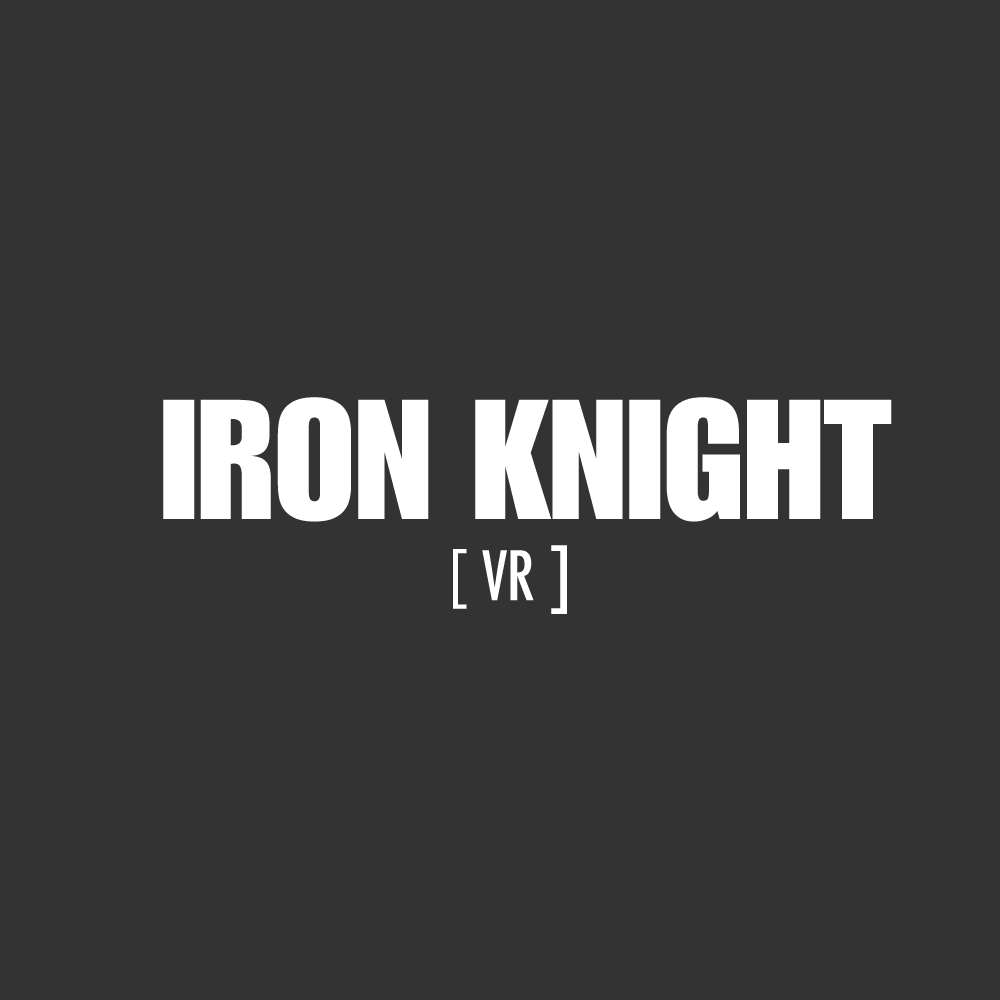
<style>
.page{position:relative;width:1000px;height:1000px;background:#333333}
.page>*{position:absolute;margin:0}
.t1{font:166.7px "ImpactLT";color:#ffffff}
.t2{font:75px "FuturaTCondensedMedium";color:#ffffff}
.t3{font:75px "MyriadPro-Regular";color:#ffffff}
</style>
<div class="page">
<p class="t1" style="left:163px;top:397px;width:729px;height:125px">IRON KNIGHT</p>
<p class="t2" style="left:453px;top:545px;width:114px;height:69px"><span class="t3">[</span> VR ]</p>
</div>
